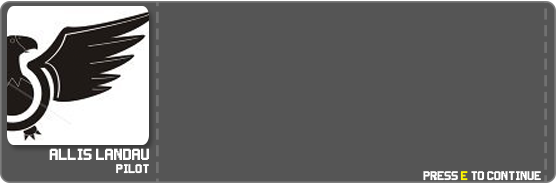
<style>
.page{position:relative;width:557px;height:184px;background:#555555}
.page>*{position:absolute;margin:0}
.t1{font:18px "Super-Smash-TV";color:#ffffff}
.t2{font:14px "Super-Smash-TV";color:#ffffff}
</style>
<div class="page">
<p class="t1" style="left:49px;top:148px;width:100px;height:12px">Allis Landau</p>
<p class="t2" style="left:116px;top:164px;width:33px;height:10px">Pilot</p>
</div>
